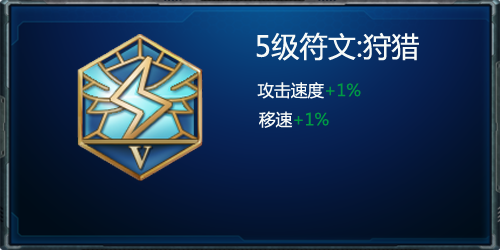
<style>
.page{position:relative;width:500px;height:250px}
.page>*{position:absolute;margin:0}
.t1{font:28.3px "MicrosoftYaHei";color:#f7faf8}
.t2{font:16.7px "MicrosoftYaHei";color:#f7faf8}
.t3{font:16.7px "MicrosoftYaHei";color:#009944}
</style>
<div class="page">
<p class="t1" style="left:256px;top:32px;width:163px;height:96px;text-align:center">5级符文:狩猎<br><span class="t2">        攻击速度</span><span class="t3">+1%</span><span class="t2">        <br>  移速</span><span class="t3">+1%</span></p>
</div>
